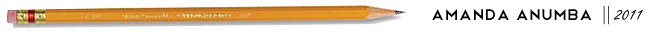
<style>
.page{position:relative;width:658px;height:34px;background:#ffffff}
.page>*{position:absolute;margin:0}
.t1{font:20px "Telegrafico";letter-spacing:0.005em;color:#000000}
.t2{font:20px "TimesNewRomanPSMT";letter-spacing:0.005em;color:#000000}
.t3{font:20px "FreestyleScript-Regular";letter-spacing:0.005em;color:#000000}
</style>
<div class="page">
<p class="t1" style="left:432px;top:6px;width:211px;height:19px">AMANDA ANUMBA  <span class="t2">|| </span><span class="t3">2011</span></p>
</div>
